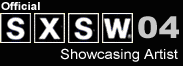
<style>
.page{position:relative;width:183px;height:66px;background:#030303}
.page>*{position:absolute;margin:0}
.t1{font:11px "Arial-BoldMT";color:#ffffff;scale:1.06 1}
.t2{font:14px "ArialMT";color:#ffffff;scale:1.06 1}
</style>
<div class="page">
<p class="t1" style="left:1px;top:2px;width:39px;height:8px">Official</p>
<p class="t2" style="left:60px;top:48px;width:118px;height:14px">Showcasing Artist</p>
</div>
